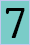
<style>
.page{position:relative;width:30px;height:45px;background:#7accc8}
.page>*{position:absolute;margin:0}
.t1{font:48px "Courier";color:#000000}
</style>
<div class="page">
<p class="t1" style="left:5px;top:8px;width:20px;height:30px">7</p>
</div>
